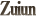
<style>
.page{position:relative;width:36px;height:18px;background:#ffffff}
.page>*{position:absolute;margin:0}
.t1{font:18px "RyuminPro-ExBold";letter-spacing:-0.115em;color:#4a3f32;font-weight:bold;scale:0.85 1}
</style>
<div class="page">
<p class="t1" style="left:0px;top:1px;width:37px;height:15px">Zuiun</p>
</div>
